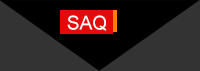
<style>
.page{position:relative;width:200px;height:71px;background:#333333}
.page>*{position:absolute;margin:0}
.t1{font:19.3px "ArialMT";color:#ffffff}
</style>
<div class="page">
<p class="t1" style="left:67px;top:15px;width:40px;height:16px">SAQ</p>
</div>
